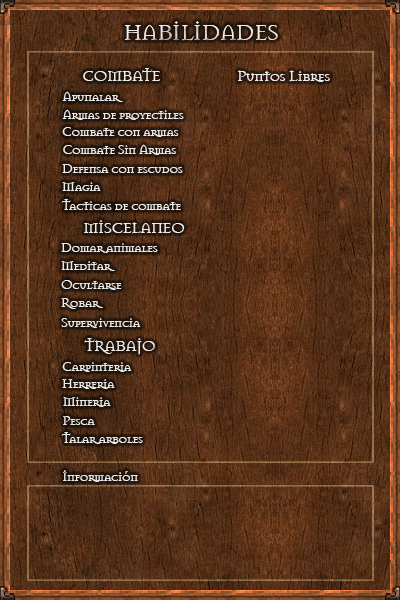
<style>
.page{position:relative;width:400px;height:600px}
.page>*{position:absolute;margin:0}
.t1{font:24px "Mason-Regular";letter-spacing:-0.06em}
.t2{font:16.5px "Mason-Regular";letter-spacing:-0.06em;color:#ececec}
.t3{font:14px "Mason-Regular";letter-spacing:-0.06em;color:#ececec}
</style>
<div class="page">
<p class="t1" style="left:125px;top:21px;width:153px;height:20px">HABILIDADES</p>
<p class="t2" style="left:83px;top:68px;width:77px;height:13px">COMBATE</p>
<p class="t2" style="left:238px;top:70px;width:92px;height:12px">Puntos Libres</p>
<p class="t3" style="left:62px;top:91px;width:61px;height:11px">Apunalar</p>
<p class="t3" style="left:62px;top:109px;width:122px;height:11px">Armas de proyectiles</p>
<p class="t3" style="left:62px;top:127px;width:117px;height:10px">Combate con armas</p>
<p class="t3" style="left:63px;top:144px;width:113px;height:11px">Combate Sin Armas</p>
<p class="t3" style="left:62px;top:164px;width:121px;height:9px">Defensa con escudos</p>
<p class="t3" style="left:62px;top:182px;width:39px;height:9px">Magia</p>
<p class="t3" style="left:61px;top:199px;width:120px;height:11px">Tacticas de combate</p>
<p class="t2" style="left:84px;top:220px;width:101px;height:14px">MISCELANEO</p>
<p class="t3" style="left:61px;top:243px;width:97px;height:10px">Domar animales</p>
<p class="t3" style="left:61px;top:261px;width:54px;height:10px">Meditar</p>
<p class="t3" style="left:61px;top:280px;width:61px;height:10px">Ocultarse</p>
<p class="t3" style="left:61px;top:298px;width:42px;height:11px">Robar</p>
<p class="t3" style="left:61px;top:318px;width:80px;height:10px">Supervivencia</p>
<p class="t2" style="left:84px;top:338px;width:71px;height:17px">TRABAJO</p>
<p class="t3" style="left:62px;top:362px;width:70px;height:10px">Carpinteria</p>
<p class="t3" style="left:62px;top:379px;width:53px;height:10px">Herreria</p>
<p class="t3" style="left:63px;top:397px;width:48px;height:10px">Mineria</p>
<p class="t3" style="left:63px;top:416px;width:32px;height:9px">Pesca</p>
<p class="t3" style="left:61px;top:432px;width:82px;height:12px">Talar arboles</p>
<p class="t3" style="left:63px;top:470px;width:75px;height:12px">Información</p>
</div>
